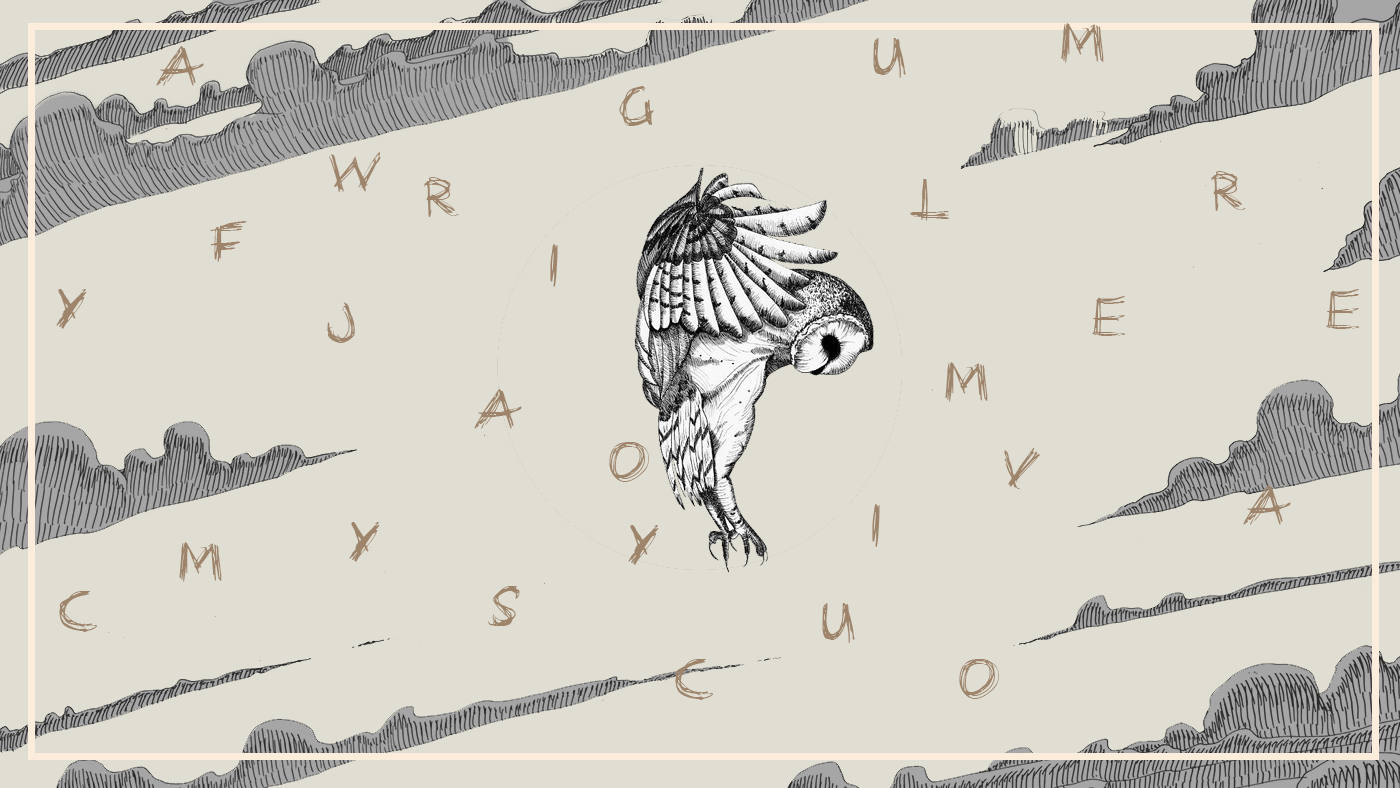
<style>
.page{position:relative;width:1400px;height:788px;background:#e0ded2}
.page>*{position:absolute;margin:0}
.t1{font:40px "manic-depressive";color:#9d846b;text-transform:uppercase}
</style>
<div class="page">
<p class="t1" style="left:1061px;top:23px;width:43px;height:40px">m</p>
<p class="t1" style="left:873px;top:38px;width:33px;height:40px">u</p>
<p class="t1" style="left:156px;top:46px;width:48px;height:40px">a</p>
<p class="t1" style="left:619px;top:86px;width:35px;height:40px">g</p>
<p class="t1" style="left:329px;top:152px;width:52px;height:40px">w</p>
<p class="t1" style="left:1211px;top:171px;width:35px;height:40px">r</p>
<p class="t1" style="left:424px;top:177px;width:35px;height:40px">r</p>
<p class="t1" style="left:910px;top:179px;width:39px;height:42px">l</p>
<p class="t1" style="left:210px;top:221px;width:37px;height:41px">f</p>
<p class="t1" style="left:550px;top:244px;width:8px;height:43px">i</p>
<p class="t1" style="left:56px;top:289px;width:31px;height:40px">y</p>
<p class="t1" style="left:1326px;top:289px;width:34px;height:40px">e</p>
<p class="t1" style="left:327px;top:302px;width:28px;height:41px">j</p>
<p class="t1" style="left:1092px;top:296px;width:34px;height:40px">e</p>
<p class="t1" style="left:945px;top:362px;width:43px;height:40px">m</p>
<p class="t1" style="left:474px;top:389px;width:48px;height:40px">a</p>
<p class="t1" style="left:609px;top:442px;width:40px;height:40px">o</p>
<p class="t1" style="left:1004px;top:448px;width:36px;height:41px">v</p>
<p class="t1" style="left:1243px;top:485px;width:48px;height:40px">a</p>
<p class="t1" style="left:872px;top:504px;width:8px;height:43px">i</p>
<p class="t1" style="left:349px;top:522px;width:31px;height:40px">y</p>
<p class="t1" style="left:628px;top:525px;width:31px;height:40px">y</p>
<p class="t1" style="left:179px;top:542px;width:43px;height:40px">m</p>
<p class="t1" style="left:59px;top:591px;width:38px;height:41px">c</p>
<p class="t1" style="left:488px;top:586px;width:32px;height:40px">s</p>
<p class="t1" style="left:822px;top:603px;width:33px;height:40px">u</p>
<p class="t1" style="left:675px;top:659px;width:38px;height:41px">c</p>
<p class="t1" style="left:959px;top:659px;width:40px;height:40px">o</p>
</div>
